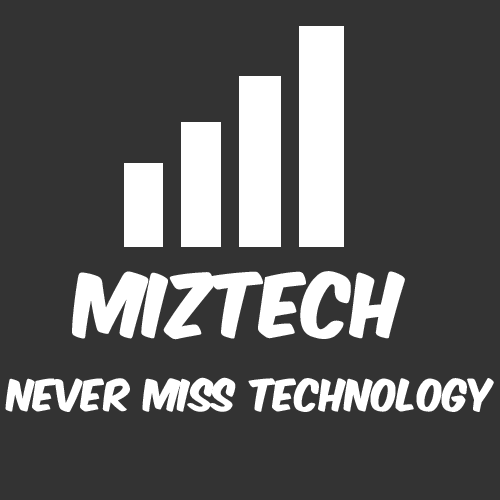
<style>
.page{position:relative;width:500px;height:500px;background:#333333}
.page>*{position:absolute;margin:0}
.t1{font:75px "KomikaAxis";color:#ffffff}
.t2{font:37.5px "KomikaAxis";color:#ffffff}
</style>
<div class="page">
<p class="t1" style="left:72px;top:271px;width:333px;height:69px">Miztech</p>
<p class="t2" style="left:5px;top:377px;width:489px;height:35px">nEVER mISS tECHNOLOGY</p>
</div>
